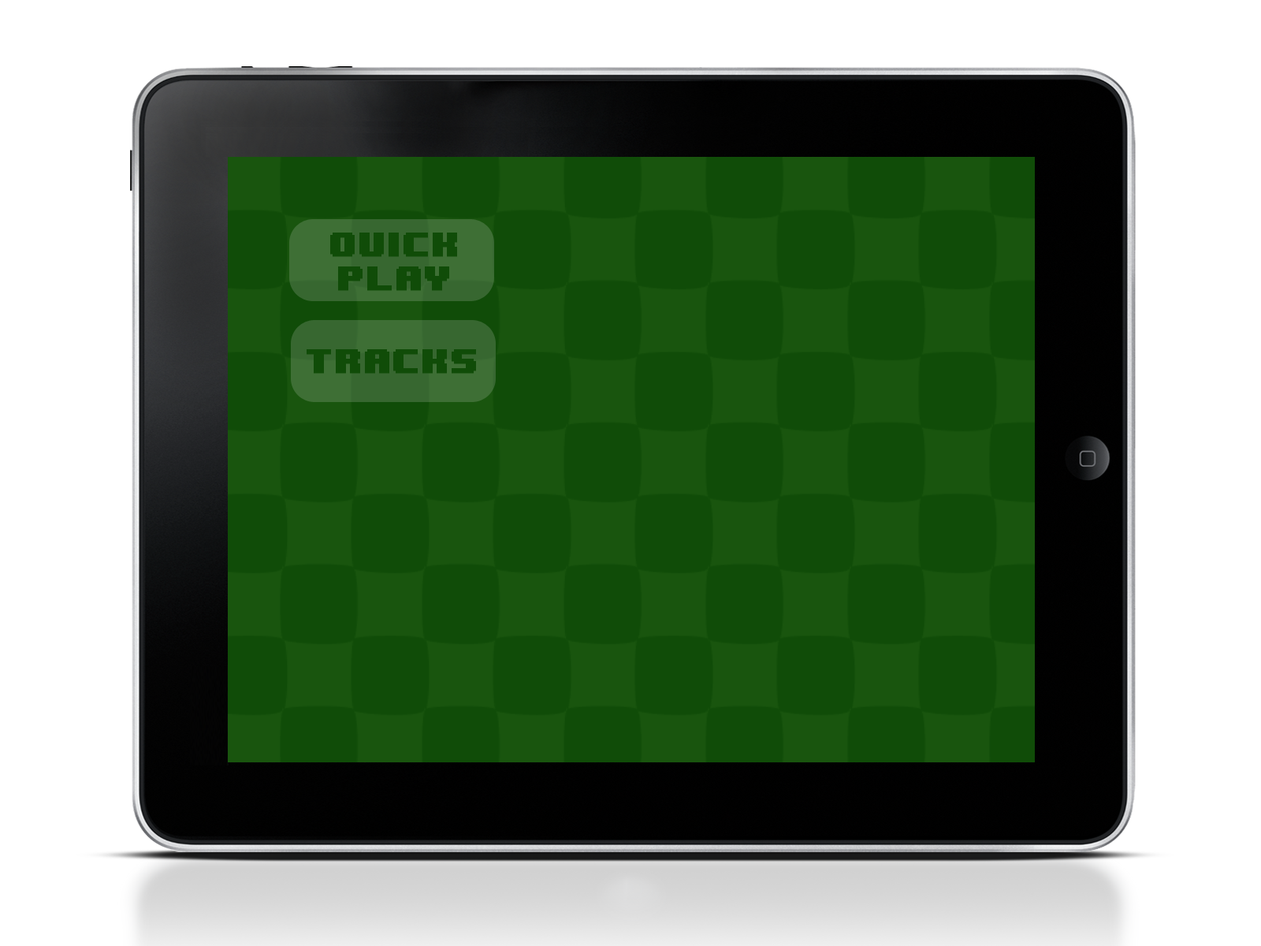
<style>
.page{position:relative;width:1261px;height:946px;background:#ffffff}
.page>*{position:absolute;margin:0}
.t1{font:28.4px "8BITWONDERNominal";color:#104c08;font-weight:bold}
.t2{font:28.4px "8BITWONDERNominal";letter-spacing:-0.01em;color:#104c08;font-weight:bold}
</style>
<div class="page">
<p class="t1" style="left:330px;top:232px;width:127px;height:59px;text-align:center">QUICK<br>PLAY</p>
<p class="t2" style="left:307px;top:349px;width:169px;height:25px">TRACKS</p>
</div>
